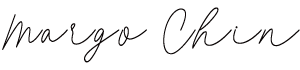
<style>
.page{position:relative;width:300px;height:70px;background:#ffffff}
.page>*{position:absolute;margin:0}
.t1{font:45.5px "FilliaScriptFREE";letter-spacing:0.105em;color:#090404;scale:0.85 1}
</style>
<div class="page">
<p class="t1" style="left:2px;top:7px;width:298px;height:56px">Margo Chin</p>
</div>
